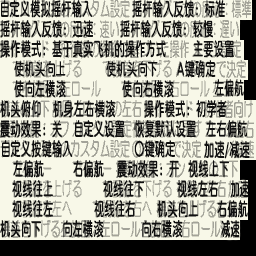
<style>
.page{position:relative;width:256px;height:256px;background:#f8f8e8}
.page>*{position:absolute;margin:0}
.t1{font:19px "ChillRoundFBold";color:#101010}
.t2{font:17.3px "ChillRoundFBold";color:#101010;scale:1.1 1}
.t3{font:19px "ChillRoundFBold";color:#101010;scale:0.95 1}
.t4{font:19px "ChillRoundFBold";color:#101010;scale:0.86 1}
.t5{font:19px "ChillRoundFBold";color:#101010;scale:0.89 1}
</style>
<div class="page">
<p class="t1" style="left:1px;top:0px;width:91px;height:18px">自定义模拟摇杆输入</p>
<p class="t1" style="left:132px;top:0px;width:93px;height:18px">摇杆输入反馈：标准</p>
<p class="t1" style="left:0px;top:20px;width:93px;height:18px">摇杆输入反馈：迅速</p>
<p class="t1" style="left:120px;top:20px;width:93px;height:18px">摇杆输入反馈：较慢</p>
<p class="t1" style="left:0px;top:40px;width:166px;height:18px">操作模式：基于真实飞机的操作方式</p>
<p class="t1" style="left:193px;top:40px;width:41px;height:18px">主要设置</p>
<p class="t2" style="left:14px;top:60px;width:52px;height:17px">使机头向上</p>
<p class="t2" style="left:106px;top:60px;width:52px;height:17px">使机头向下</p>
<p class="t1" style="left:177px;top:60px;width:39px;height:18px">A键确定</p>
<p class="t1" style="left:14px;top:80px;width:52px;height:18px">使向左横滚</p>
<p class="t1" style="left:122px;top:80px;width:52px;height:18px">使向右横滚</p>
<p class="t3" style="left:214px;top:79px;width:30px;height:18px">左偏航</p>
<p class="t1" style="left:0px;top:100px;width:41px;height:18px">机头俯仰</p>
<p class="t1" style="left:53px;top:100px;width:62px;height:18px">机身左右横滚</p>
<p class="t1" style="left:144px;top:100px;width:83px;height:18px">操作模式：初学者</p>
<p class="t1" style="left:0px;top:120px;width:62px;height:18px">震动效果：关</p>
<p class="t1" style="left:75px;top:120px;width:50px;height:18px">自定义设置</p>
<p class="t1" style="left:134px;top:120px;width:62px;height:18px">恢复默认设置</p>
<p class="t1" style="left:206px;top:120px;width:41px;height:18px">左右偏航</p>
<p class="t1" style="left:2px;top:140px;width:71px;height:18px">自定义按键输入</p>
<p class="t1" style="left:134px;top:140px;width:41px;height:18px">〇键确定</p>
<p class="t1" style="left:204px;top:141px;width:46px;height:18px">加速/减速</p>
<p class="t1" style="left:13px;top:160px;width:31px;height:18px">左偏航</p>
<p class="t1" style="left:73px;top:160px;width:31px;height:18px">右偏航</p>
<p class="t1" style="left:117px;top:160px;width:62px;height:18px">震动效果：开</p>
<p class="t1" style="left:188px;top:160px;width:41px;height:18px">视线上下</p>
<p class="t1" style="left:12px;top:180px;width:41px;height:18px">视线往上</p>
<p class="t1" style="left:103px;top:180px;width:41px;height:18px">视线往下</p>
<p class="t1" style="left:177px;top:180px;width:41px;height:18px">视线左右</p>
<p class="t4" style="left:230px;top:180px;width:19px;height:17px">加速</p>
<p class="t1" style="left:12px;top:200px;width:41px;height:18px">视线往左</p>
<p class="t1" style="left:94px;top:200px;width:41px;height:18px">视线往右</p>
<p class="t1" style="left:157px;top:200px;width:41px;height:18px">机头向上</p>
<p class="t1" style="left:217px;top:200px;width:31px;height:18px">右偏航</p>
<p class="t1" style="left:0px;top:220px;width:41px;height:18px">机头向下</p>
<p class="t1" style="left:63px;top:220px;width:41px;height:18px">向左横滚</p>
<p class="t1" style="left:142px;top:220px;width:41px;height:18px">向右横滚</p>
<p class="t5" style="left:221px;top:220px;width:19px;height:18px">减速</p>
</div>
